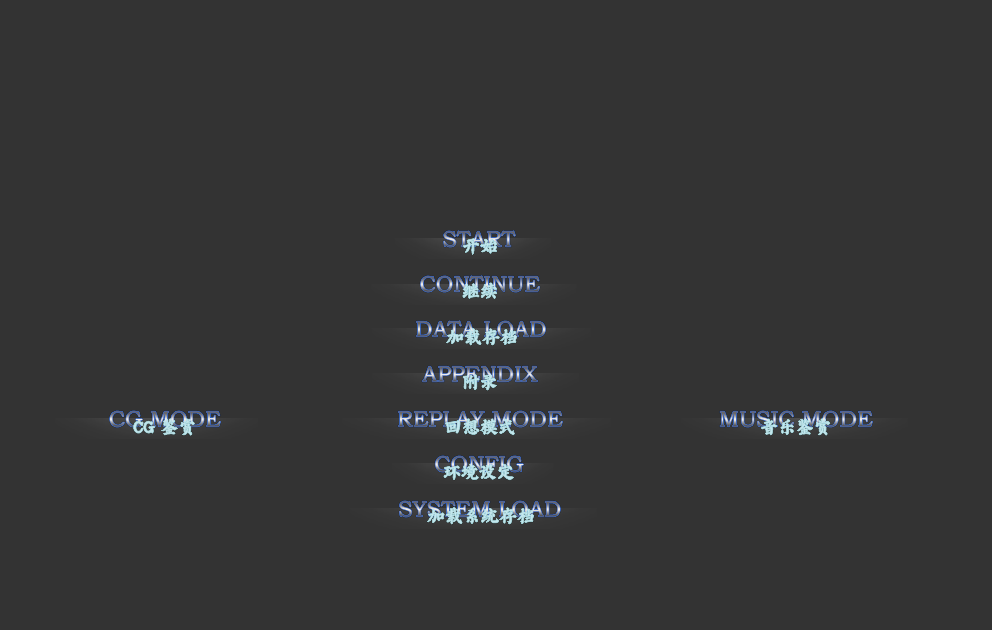
<style>
.page{position:relative;width:992px;height:630px;background:#333333}
.page>*{position:absolute;margin:0}
.t1{font:22px "BookmanOldStyle"}
.t2{font:18px "AaYZQDBTBNon-CommercialUse";color:#c4e7ed}
</style>
<div class="page">
<p class="t1" style="left:443px;top:231px;width:73px;height:16px">START</p>
<p class="t2" style="left:463px;top:239px;width:34px;height:16px">开始</p>
<p class="t1" style="left:420px;top:276px;width:120px;height:16px">CONTINUE</p>
<p class="t2" style="left:463px;top:283px;width:34px;height:16px">继续</p>
<p class="t1" style="left:416px;top:321px;width:130px;height:16px">DATA LOAD</p>
<p class="t2" style="left:446px;top:328px;width:71px;height:17px">加载存档</p>
<p class="t1" style="left:422px;top:366px;width:116px;height:16px">APPENDIX</p>
<p class="t2" style="left:463px;top:374px;width:34px;height:16px">附录</p>
<p class="t1" style="left:110px;top:411px;width:111px;height:16px">CG MODE</p>
<p class="t1" style="left:398px;top:411px;width:165px;height:16px">REPLAY MODE</p>
<p class="t1" style="left:720px;top:411px;width:153px;height:16px">MUSIC MODE</p>
<p class="t2" style="left:134px;top:419px;width:61px;height:16px">CG 鉴赏</p>
<p class="t2" style="left:445px;top:419px;width:70px;height:16px">回想模式</p>
<p class="t2" style="left:761px;top:419px;width:69px;height:16px">音乐鉴赏</p>
<p class="t1" style="left:435px;top:456px;width:89px;height:16px">CONFIG</p>
<p class="t2" style="left:444px;top:464px;width:70px;height:16px">环境设定</p>
<p class="t1" style="left:399px;top:501px;width:161px;height:16px">SYSTEM LOAD</p>
<p class="t2" style="left:427px;top:507px;width:107px;height:17px">加载系统存档</p>
</div>
